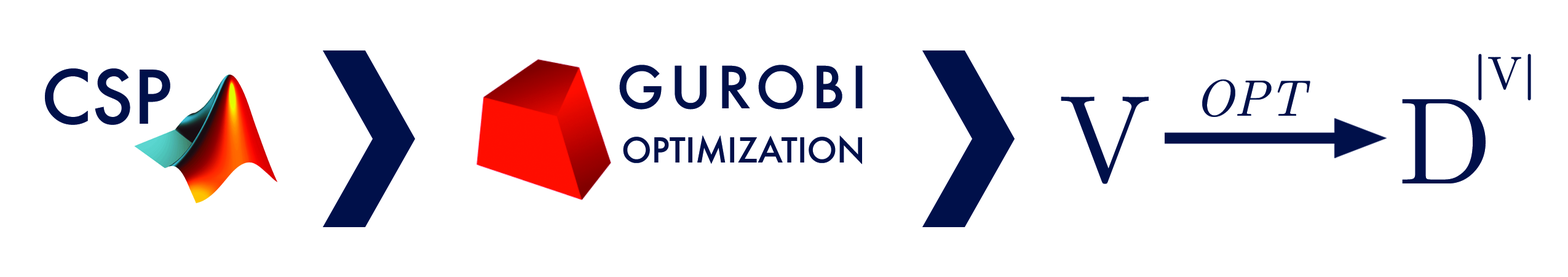
<style>
.page{position:relative;width:1568px;height:277px;background:#ffffff}
.page>*{position:absolute;margin:0}
.t1{font:46.1px "CMUSerif-Bold";color:#001049}
.t2{font:46.1px "CMUSerif-Roman";color:#001049}
.t3{font:56.4px "Futura-Medium";letter-spacing:0.1em;color:#001049}
.t4{font:71.7px "Futura-Medium";color:#001049}
.t5{font:51.2px "CMUSerif-Italic";color:#001049}
.t6{font:123px "CMUSerif-Roman";color:#001049}
.t7{font:33.3px "Futura-Medium";color:#001049}
</style>
<div class="page">
<p class="t1" style="left:1478px;top:53px;width:53px;height:47px">|<span class="t2">V</span>|</p>
<p class="t3" style="left:619px;top:65px;width:244px;height:44px">GUROBI</p>
<p class="t4" style="left:45px;top:68px;width:125px;height:57px">CSP</p>
<p class="t5" style="left:1202px;top:79px;width:108px;height:38px">OPT</p>
<p class="t6" style="left:1061px;top:97px;width:88px;height:87px">V</p>
<p class="t6" style="left:1402px;top:99px;width:84px;height:84px">D</p>
<p class="t7" style="left:623px;top:135px;width:239px;height:29px">OPTIMIZATION</p>
</div>
